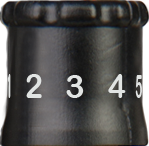
<style>
.page{position:relative;width:149px;height:146px}
.page>*{position:absolute;margin:0}
.t1{font:32.5px "ArialRoundedMTBold";letter-spacing:-0.01em;color:#e1e4e3;scale:0.93 1}
.t2{font:33.3px "ArialRoundedMTBold";letter-spacing:-0.01em;color:#e1e4e3}
.t3{font:32.5px "ArialRoundedMTBold";letter-spacing:-0.01em;color:#e1e4e3;scale:0.36 1}
</style>
<div class="page">
<p class="t1" style="left:26px;top:74px;width:16px;height:24px">2</p>
<p class="t2" style="left:66px;top:75px;width:18px;height:23px">3</p>
<p class="t1" style="left:108px;top:74px;width:18px;height:24px">4</p>
<p class="t3" style="left:135px;top:75px;width:7px;height:23px">5</p>
</div>
